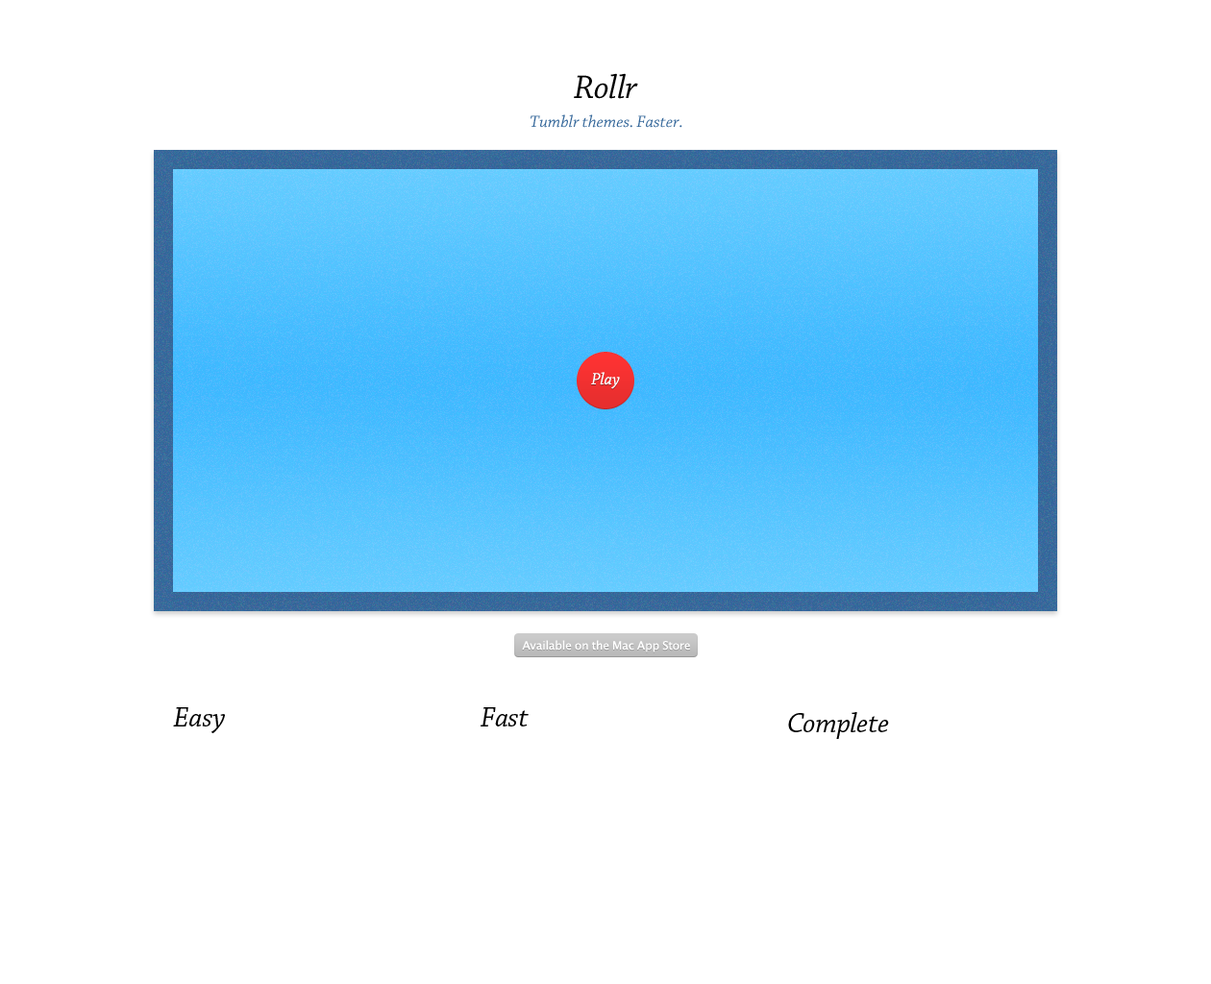
<style>
.page{position:relative;width:1211px;height:984px;background:#ffffff}
.page>*{position:absolute;margin:0}
.t1{font:34.6px "ChaparralPro-Italic";color:#000000}
.t2{font:17.3px "ChaparralPro-Italic";color:#336699}
.t3{font:17.3px "ChaparralPro-Italic";color:#ffffff}
.t4{font:11.5px "LucidaGrande";color:#ffffff}
.t5{font:28.8px "ChaparralPro-Italic";color:#000000}
</style>
<div class="page">
<p class="t1" style="left:574px;top:73px;width:64px;height:26px">Rollr</p>
<p class="t2" style="left:531px;top:114px;width:152px;height:14px">Tumblr themes. Faster.</p>
<p class="t3" style="left:591px;top:372px;width:29px;height:17px">Play</p>
<p class="t4" style="left:522px;top:640px;width:168px;height:13px">Available on the Mac App Store</p>
<p class="t5" style="left:173px;top:708px;width:52px;height:26px">Easy</p>
<p class="t5" style="left:481px;top:708px;width:48px;height:19px">Fast</p>
<p class="t5" style="left:788px;top:712px;width:101px;height:27px">Complete</p>
</div>
